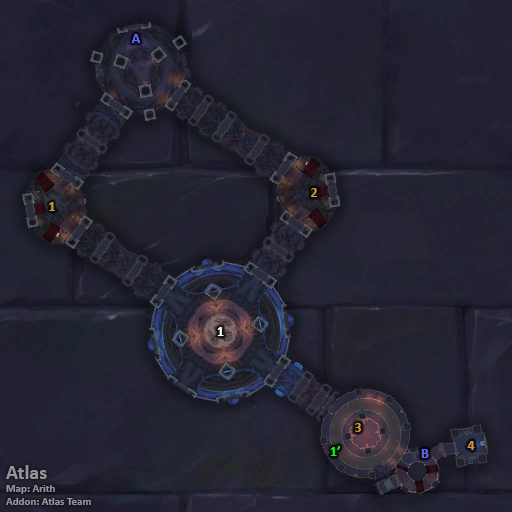
<style>
.page{position:relative;width:512px;height:512px}
.page>*{position:absolute;margin:0}
.t1{font:14px "Calibri-Bold";color:#6666ff}
.t2{font:14px "Calibri-Bold";color:#cc9933}
.t3{font:14px "Calibri-Bold";color:#ffffff}
.t4{font:14px "Calibri-Bold";color:#00ff00}
.t5{font:11px "Calibri-Bold";color:#949499}
.t6{font:20px "Calibri-Bold";color:#949499}
</style>
<div class="page">
<p class="t1" style="left:131px;top:34px;width:9px;height:9px">A</p>
<p class="t2" style="left:311px;top:188px;width:7px;height:9px">2</p>
<p class="t2" style="left:49px;top:202px;width:6px;height:9px">1</p>
<p class="t3" style="left:217px;top:327px;width:7px;height:9px">1</p>
<p class="t2" style="left:355px;top:423px;width:6px;height:9px">3</p>
<p class="t4" style="left:330px;top:446px;width:10px;height:10px">1’</p>
<p class="t1" style="left:421px;top:449px;width:8px;height:9px">B</p>
<p class="t2" style="left:467px;top:441px;width:8px;height:9px">4</p>
<p class="t5" style="left:6px;top:465px;width:85px;height:40px"><span class="t6">Atlas<br></span>Map: Arith<br>Addon: Atlas Team</p>
</div>
